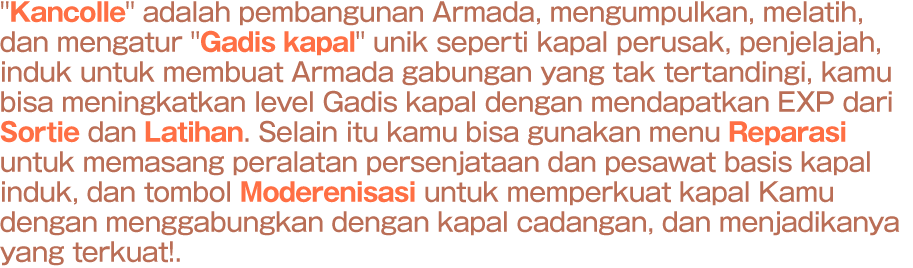
<style>
.page{position:relative;width:913px;height:268px;background:#ffffff}
.page>*{position:absolute;margin:0}
.t1{font:26px/30px "GothicMB101Pro-Medium";letter-spacing:-0.02em;color:#ba6e56;scale:0.95 1}
.t2{font:26px/30px "GothicMB101Pro-Bold";letter-spacing:-0.02em;color:#ff6f44;scale:0.95 1}
</style>
<div class="page">
<p class="t1" style="left:0px;top:1px;width:900px;height:265px">"<span class="t2">Kancolle</span>" adalah pembangunan Armada, mengumpulkan, melatih,<br>dan mengatur "<span class="t2">Gadis kapal</span>" unik seperti kapal perusak, penjelajah,<br>induk untuk membuat Armada gabungan yang tak tertandingi, kamu<br>bisa meningkatkan level Gadis kapal dengan mendapatkan EXP dari<br><span class="t2">Sortie</span> dan <span class="t2">Latihan</span>. Selain itu kamu bisa gunakan menu <span class="t2">Reparasi </span><br>untuk memasang peralatan persenjataan dan pesawat basis kapal<br>induk, dan tombol <span class="t2">Moderenisasi </span>untuk memperkuat kapal Kamu <br>dengan menggabungkan dengan kapal cadangan, dan menjadikanya<br>yang terkuat!.</p>
</div>
